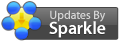
<style>
.page{position:relative;width:120px;height:42px;background:#ffffff}
.page>*{position:absolute;margin:0}
.t1{font:12px "MyriadApple-Semibold";letter-spacing:-0.01em;color:#d6d6d6}
.t2{font:18px "MyriadApple-Bold";letter-spacing:-0.01em;color:#ffffff}
.t3{font:18px "MyriadApple-Bold";letter-spacing:-0.01em;color:#ffffff;font-variant:small-caps}
</style>
<div class="page">
<p class="t1" style="left:50px;top:10px;width:56px;height:12px">Updates By</p>
<p class="t2" style="left:49px;top:21px;width:57px;height:17px"><span class="t3">S</span>parkle</p>
</div>
